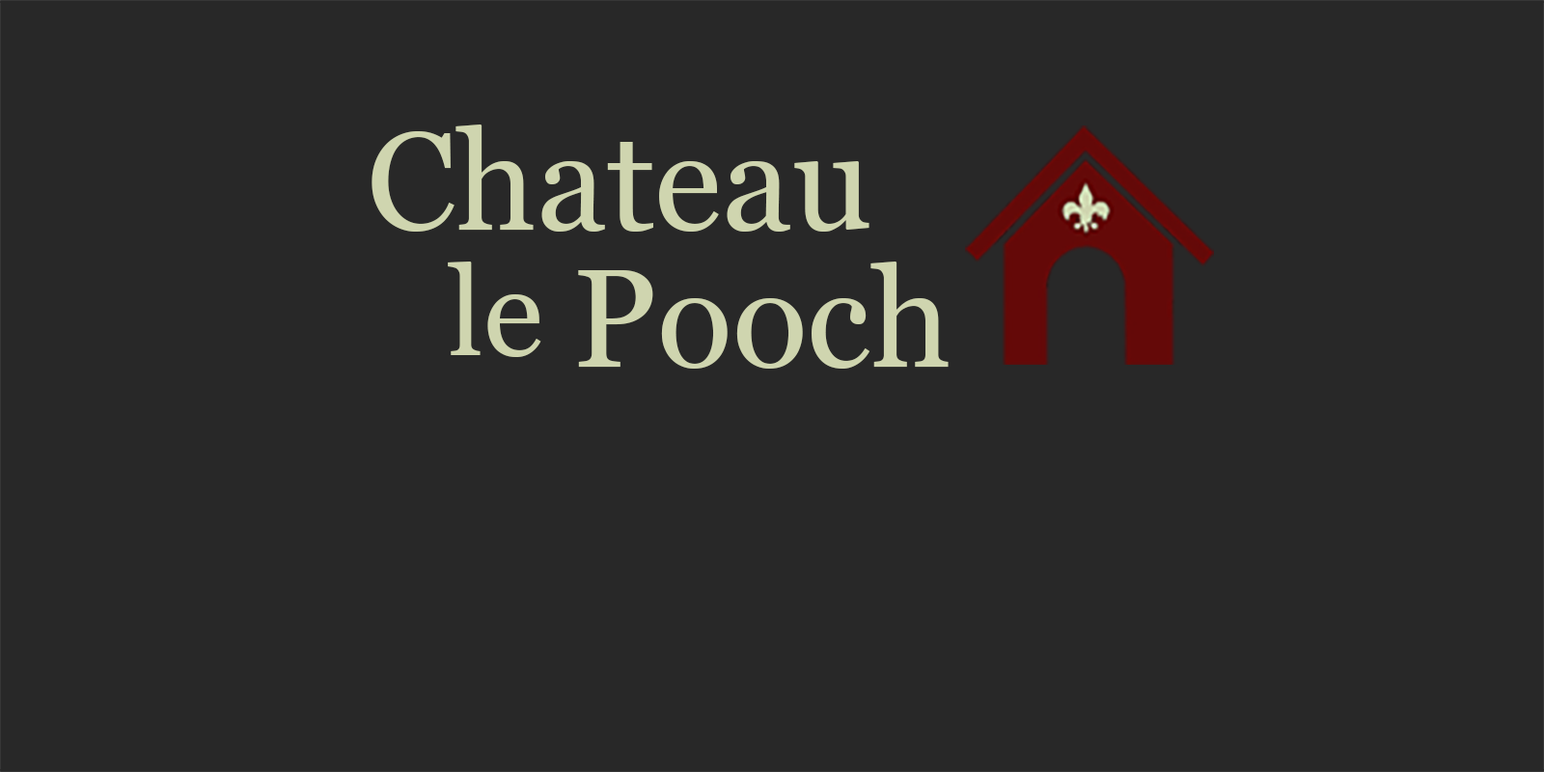
<style>
.page{position:relative;width:1544px;height:772px;background:#282828}
.page>*{position:absolute;margin:0}
.t1{font:139px "Georgia";color:#cfd5af}
.t2{font:123.5px "Georgia";color:#cfd5af}
</style>
<div class="page">
<p class="t1" style="left:372px;top:125px;width:498px;height:107px">Chateau</p>
<p class="t2" style="left:448px;top:262px;width:93px;height:95px">le</p>
<p class="t1" style="left:578px;top:262px;width:371px;height:107px">Pooch</p>
</div>
